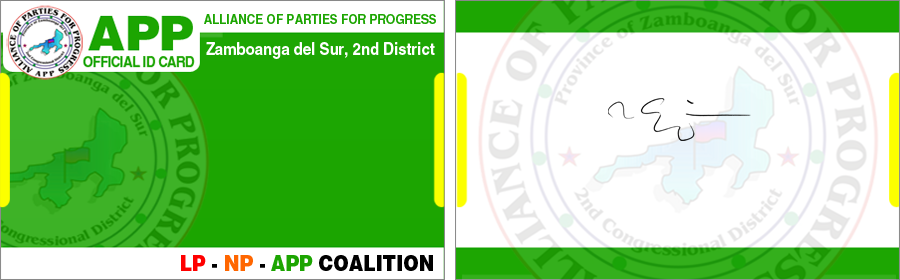
<style>
.page{position:relative;width:900px;height:280px;background:#ffffff}
.page>*{position:absolute;margin:0}
.t1{font:13.5px "HelveticaCE-Bold";color:#1ca501;scale:0.88 1}
.t2{font:16.9px "HelveticaCE-Bold";color:#ffffff;scale:0.88 1}
.t3{font:21.1px "Helvetica-Black";color:#000000;scale:0.88 1}
.t4{font:21.1px "Helvetica-Black";color:#ff0000;scale:0.88 1}
.t5{font:21.1px "Helvetica-Black";color:#ff6600;scale:0.88 1}
.t6{font:21.1px "Helvetica-Black";color:#1ca501;scale:0.88 1}
</style>
<div class="page">
<p class="t1" style="left:204px;top:14px;width:232px;height:10px">ALLIANCE OF PARTIES FOR PROGRESS</p>
<p class="t2" style="left:206px;top:42px;width:229px;height:17px">Zamboanga del Sur, 2nd District</p>
<p class="t3" style="left:181px;top:255px;width:252px;height:16px"><span class="t4">LP </span>- <span class="t5">NP </span>- <span class="t6">APP </span>COALITION</p>
</div>
